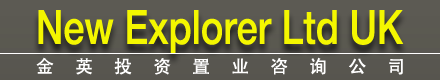
<style>
.page{position:relative;width:440px;height:80px}
.page>*{position:absolute;margin:0}
.t1{font:47.3px "Helvetica65-Medium";color:#f4f700;scale:0.8 1}
.t2{font:17.8px "AdobeHeitiStd-Regular";letter-spacing:1.2em;color:#ffffff}
</style>
<div class="page">
<p class="t1" style="left:38px;top:10px;width:366px;height:44px">New Explorer Ltd UK</p>
<p class="t2" style="left:36px;top:57px;width:367px;height:18px">金英投资置业咨询公司</p>
</div>
